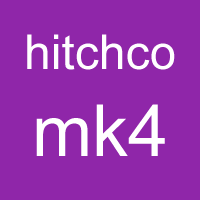
<style>
.page{position:relative;width:200px;height:200px;background:#8f26a9}
.page>*{position:absolute;margin:0}
.t1{font:48px "ArialMT";color:#ffffff}
.t2{font:72px "ArialMT";color:#ffffff}
</style>
<div class="page">
<p class="t1" style="left:27px;top:34px;width:148px;height:36px">hitchco</p>
<p class="t2" style="left:36px;top:104px;width:129px;height:52px">mk4</p>
</div>
